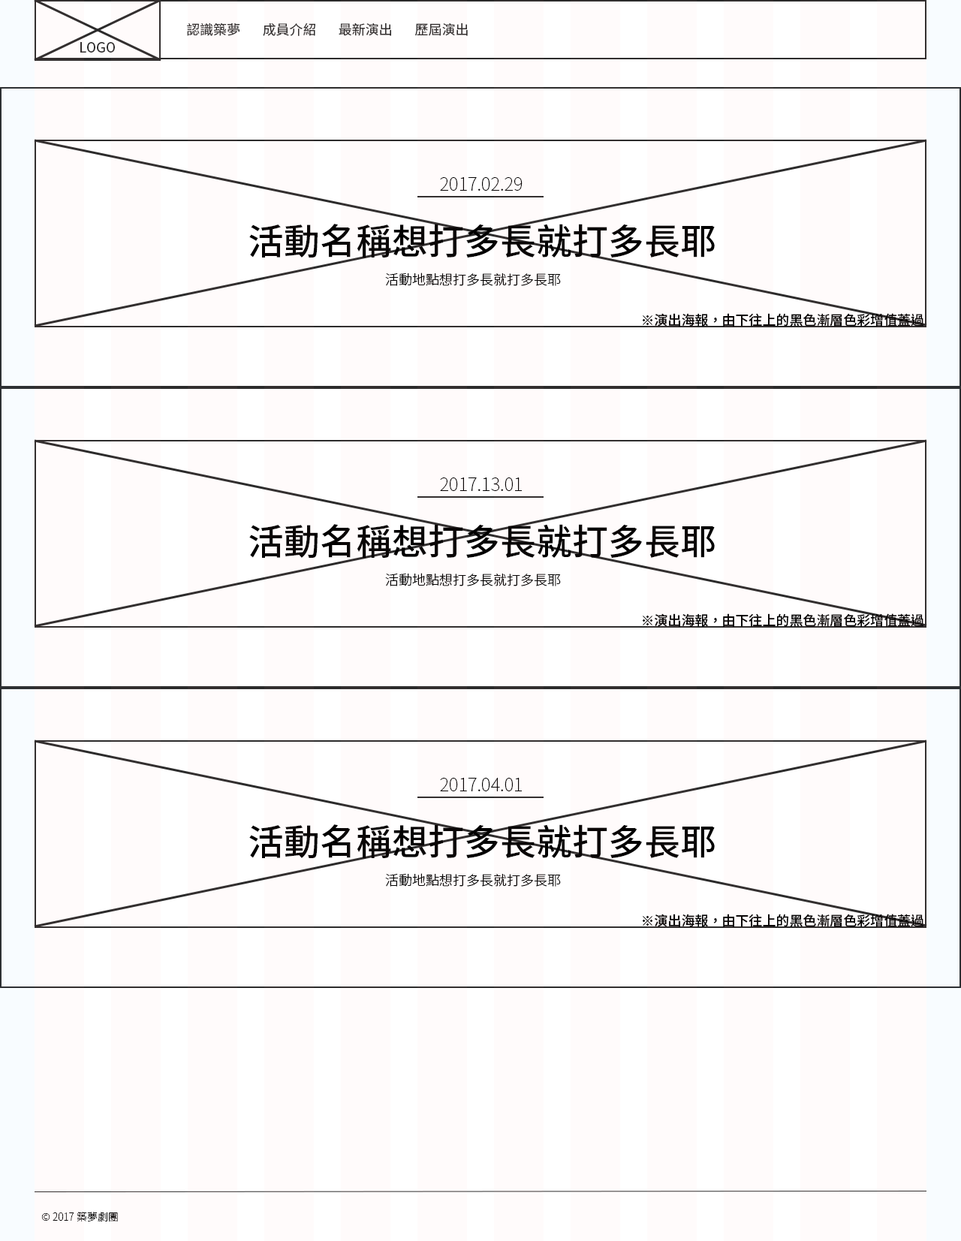
<style>
.page{position:relative;width:961px;height:1241px;background:#fffbfb}
.page>*{position:absolute;margin:0}
.t1{font:13.5px "NotoSansCJKtc-Regular";color:#2b2b2b}
.t2{font:18px "NotoSansCJKtc-Thin";color:#000000}
.t3{font:36px "NotoSansCJKtc-Medium";color:#000000}
.t4{font:13.5px "NotoSansCJKtc-Light";color:#000000}
.t5{font:13.5px "NotoSansCJKtc-Medium";color:#000000}
.t6{font:10.5px "NotoSansCJKtc-Thin";color:#000000}
</style>
<div class="page">
<p class="t1" style="left:187px;top:23px;width:53px;height:13px">認識築夢</p>
<p class="t1" style="left:263px;top:23px;width:52px;height:13px">成員介紹</p>
<p class="t1" style="left:339px;top:23px;width:52px;height:13px">最新演出</p>
<p class="t1" style="left:415px;top:23px;width:53px;height:13px">歷屆演出</p>
<p class="t2" style="left:440px;top:177px;width:82px;height:14px">2017.02.29</p>
<p class="t3" style="left:249px;top:224px;width:466px;height:34px">活動名稱想打多長就打多長耶</p>
<p class="t4" style="left:385px;top:273px;width:176px;height:13px">活動地點想打多長就打多長耶</p>
<p class="t5" style="left:643px;top:313px;width:281px;height:14px">※演出海報，由下往上的黑色漸層色彩增值蓋過</p>
<p class="t2" style="left:440px;top:477px;width:82px;height:14px">2017.13.01</p>
<p class="t3" style="left:249px;top:524px;width:466px;height:35px">活動名稱想打多長就打多長耶</p>
<p class="t4" style="left:385px;top:573px;width:176px;height:13px">活動地點想打多長就打多長耶</p>
<p class="t5" style="left:643px;top:613px;width:281px;height:14px">※演出海報，由下往上的黑色漸層色彩增值蓋過</p>
<p class="t2" style="left:440px;top:778px;width:82px;height:13px">2017.04.01</p>
<p class="t3" style="left:249px;top:824px;width:466px;height:35px">活動名稱想打多長就打多長耶</p>
<p class="t4" style="left:385px;top:873px;width:176px;height:14px">活動地點想打多長就打多長耶</p>
<p class="t5" style="left:643px;top:914px;width:281px;height:13px">※演出海報，由下往上的黑色漸層色彩增值蓋過</p>
<p class="t6" style="left:41px;top:1212px;width:77px;height:10px">© 2017 築夢劇團</p>
</div>
